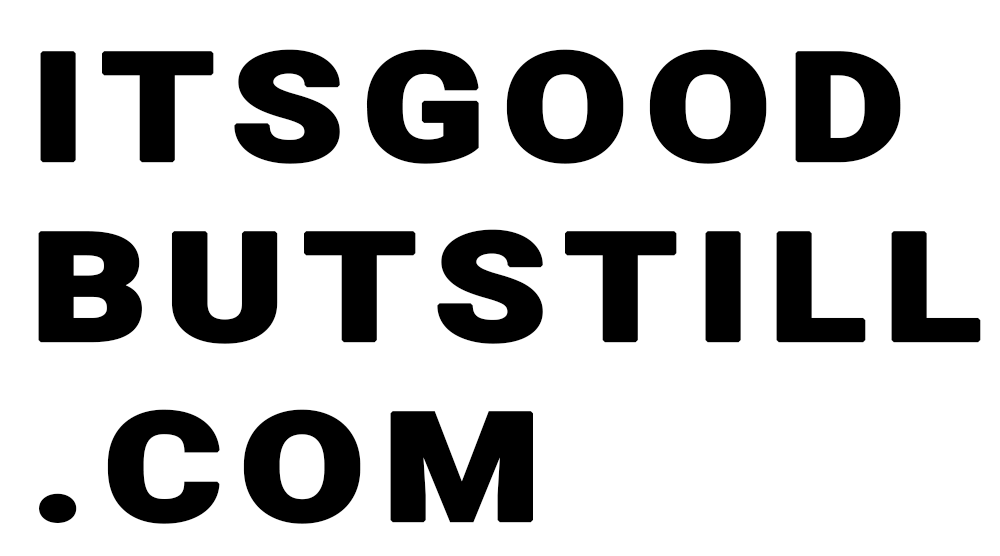
<style>
.page{position:relative;width:1000px;height:556px;background:#ffffff}
.page>*{position:absolute;margin:0}
.t1{font:150px "Roboto-Black";letter-spacing:0.075em;color:#000000;font-weight:bold;scale:1.2 1}
</style>
<div class="page">
<p class="t1" style="left:38px;top:49px;width:943px;height:475px">ITSGOOD<br>BUTSTILL<br>.COM</p>
</div>
